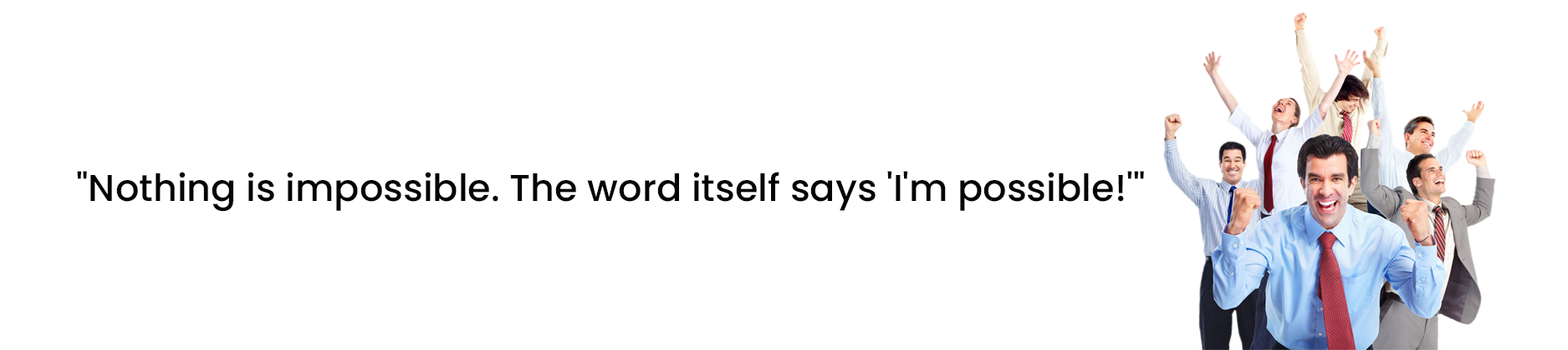
<style>
.page{position:relative;width:1568px;height:350px;background:#ffffff}
.page>*{position:absolute;margin:0}
.t1{font:37.3px "Poppins-Medium";color:#040404}
</style>
<div class="page">
<p class="t1" style="left:77px;top:171px;width:1067px;height:40px">"Nothing is impossible. The word itself says 'I'm possible!'"</p>
</div>
